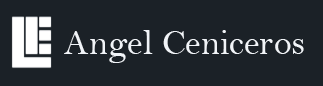
<style>
.page{position:relative;width:323px;height:86px;background:#1b2127}
.page>*{position:absolute;margin:0}
.t1{font:36px "BellMT";color:#f1f4f8}
</style>
<div class="page">
<p class="t1" style="left:64px;top:30px;width:240px;height:33px">Angel Ceniceros</p>
</div>
